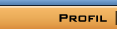
<style>
.page{position:relative;width:117px;height:29px}
.page>*{position:absolute;margin:0}
.t1{font:14px "BankGothicBT-Medium";color:#000000}
</style>
<div class="page">
<p class="t1" style="left:59px;top:14px;width:48px;height:8px">Profil</p>
</div>
